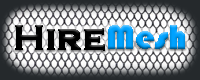
<style>
.page{position:relative;width:200px;height:80px}
.page>*{position:absolute;margin:0}
.t1{font:36px "CopperplateGothic-Bold";color:#000000;font-weight:bold}
.t2{font:36px "Bauhaus93";color:#00a2ff}
</style>
<div class="page">
<p class="t1" style="left:15px;top:25px;width:170px;height:26px">Hire<span class="t2">Mesh</span></p>
</div>
